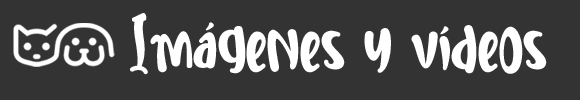
<style>
.page{position:relative;width:580px;height:100px;background:#333333}
.page>*{position:absolute;margin:0}
.t1{font:54.5px "SweetUnicorn";color:#ffffff}
</style>
<div class="page">
<p class="t1" style="left:130px;top:13px;width:417px;height:62px">Imágenes y vídeos</p>
</div>
